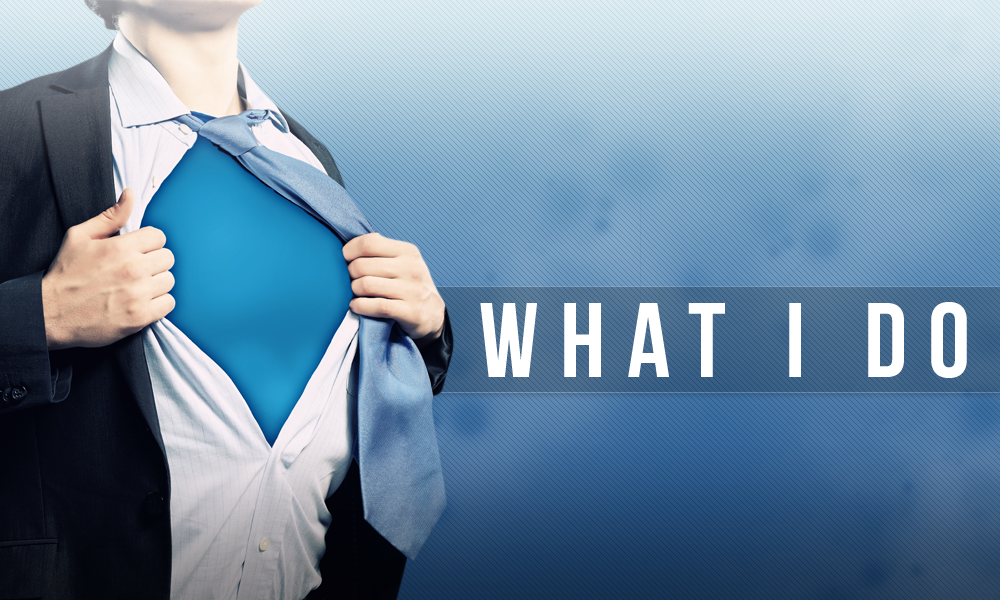
<style>
.page{position:relative;width:1000px;height:600px}
.page>*{position:absolute;margin:0}
.t1{font:106.1px "BebasNeue";letter-spacing:0.2em;color:#ffffff}
</style>
<div class="page">
<p class="t1" style="left:480px;top:302px;width:487px;height:76px">What i do</p>
</div>
